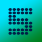
<style>
.page{position:relative;width:42px;height:42px}
.page>*{position:absolute;margin:0}
.t1{font:40px "Ozone";letter-spacing:0.025em;color:#001e46;scale:1.2 1}
</style>
<div class="page">
<p class="t1" style="left:8px;top:8px;width:25px;height:27px">5</p>
</div>
